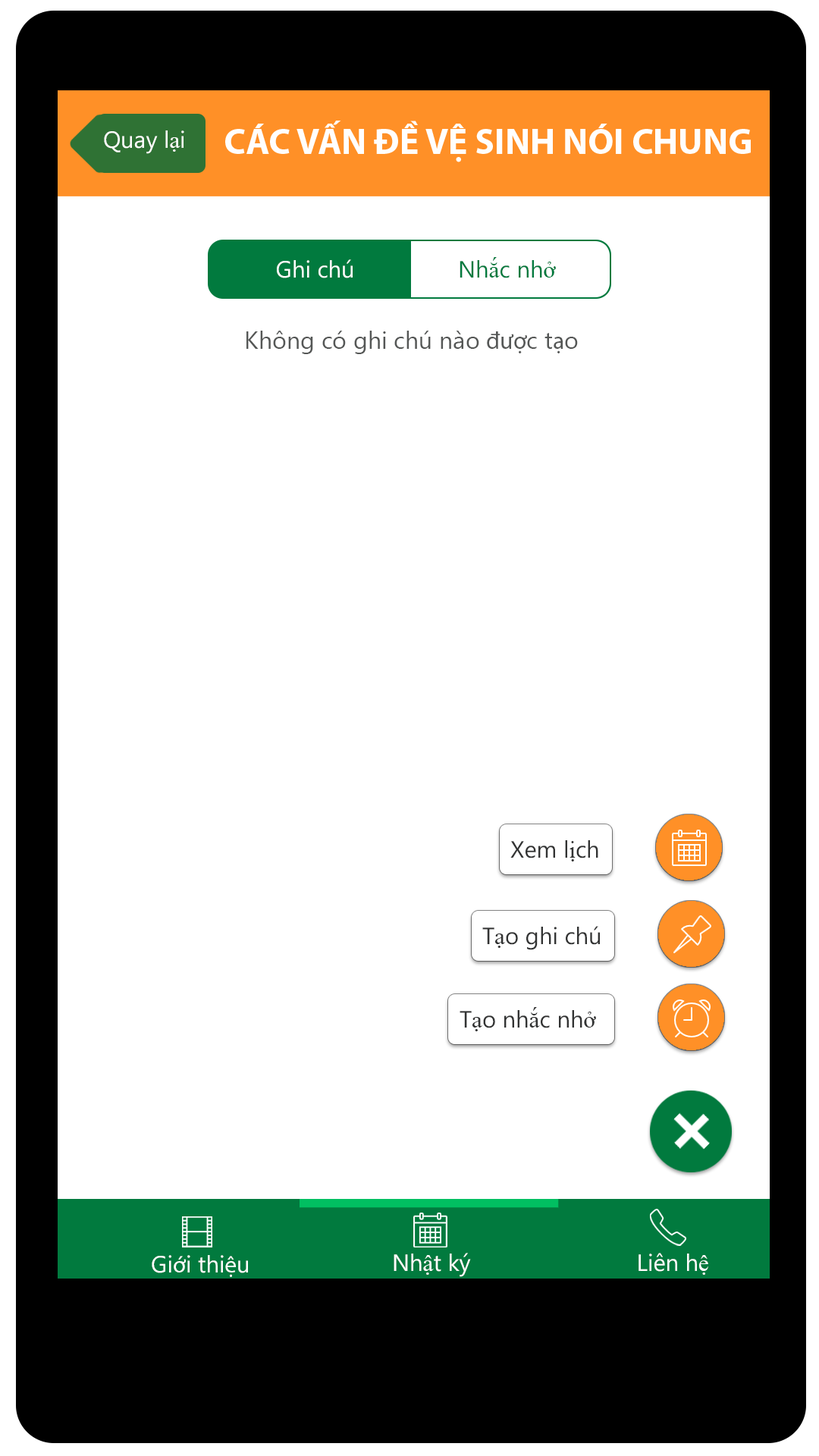
<style>
.page{position:relative;width:819px;height:1456px;background:#ffffff}
.page>*{position:absolute;margin:0}
.t1{font:23.6px "MicrosoftNewTaiLue";color:#fffefd}
.t2{font:23.6px "TimesNewRomanPSMT";color:#fffefd}
.t3{font:23.6px "MicrosoftNewTaiLue";color:#017a3e}
.t4{font:23.6px "TimesNewRomanPSMT";color:#017a3e}
.t5{font:24.3px "MicrosoftNewTaiLue";color:#555756}
.t6{font:24.3px "MyriadPro-Regular";color:#555756}
.t7{font:23.6px "MicrosoftNewTaiLue";color:#323333}
.t8{font:23.6px "TimesNewRomanPSMT";color:#323333}
.t9{font:23.6px "MyriadPro-Regular";color:#fffefd}
</style>
<div class="page">
<p class="t1" style="left:104px;top:130px;width:80px;height:24px">Quay l<span class="t2">ạ</span>i</p>
<p class="t3" style="left:460px;top:257px;width:96px;height:21px">Nh<span class="t4">ắ</span>c nh<span class="t4">ở</span></p>
<p class="t1" style="left:277px;top:259px;width:76px;height:19px">Ghi chú</p>
<p class="t5" style="left:246px;top:331px;width:332px;height:23px">Không có ghi chú nào <span class="t6">đượ</span>c t<span class="t6">ạ</span>o</p>
<p class="t7" style="left:510px;top:840px;width:88px;height:21px">Xem l<span class="t8">ị</span>ch</p>
<p class="t7" style="left:482px;top:926px;width:118px;height:24px">T<span class="t8">ạ</span>o ghi chú</p>
<p class="t7" style="left:460px;top:1007px;width:136px;height:24px">T<span class="t8">ạ</span>o nh<span class="t8">ắ</span>c nh<span class="t8">ở</span></p>
<p class="t1" style="left:394px;top:1253px;width:77px;height:24px">Nh<span class="t2">ậ</span>t ký</p>
<p class="t1" style="left:639px;top:1253px;width:69px;height:22px">Liên h<span class="t2">ệ</span></p>
<p class="t1" style="left:152px;top:1255px;width:96px;height:22px">Gi<span class="t9">ớ</span>i thi<span class="t9">ệ</span>u</p>
</div>
